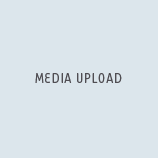
<style>
.page{position:relative;width:158px;height:158px;background:#dce6ec}
.page>*{position:absolute;margin:0}
.t1{font:16.3px "TarzanaNarrow";letter-spacing:0.025em;color:#504e53;text-transform:uppercase}
</style>
<div class="page">
<p class="t1" style="left:35px;top:73px;width:87px;height:10px">media upload</p>
</div>
